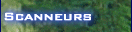
<style>
.page{position:relative;width:132px;height:32px}
.page>*{position:absolute;margin:0}
.t1{font:14px "BankGothicBT-Medium";color:#ffffff;font-weight:bold}
</style>
<div class="page">
<p class="t1" style="left:4px;top:12px;width:87px;height:9px">Scanneurs</p>
<p class="t1" style="left:4px;top:12px;width:87px;height:9px">Scanneurs</p>
</div>
